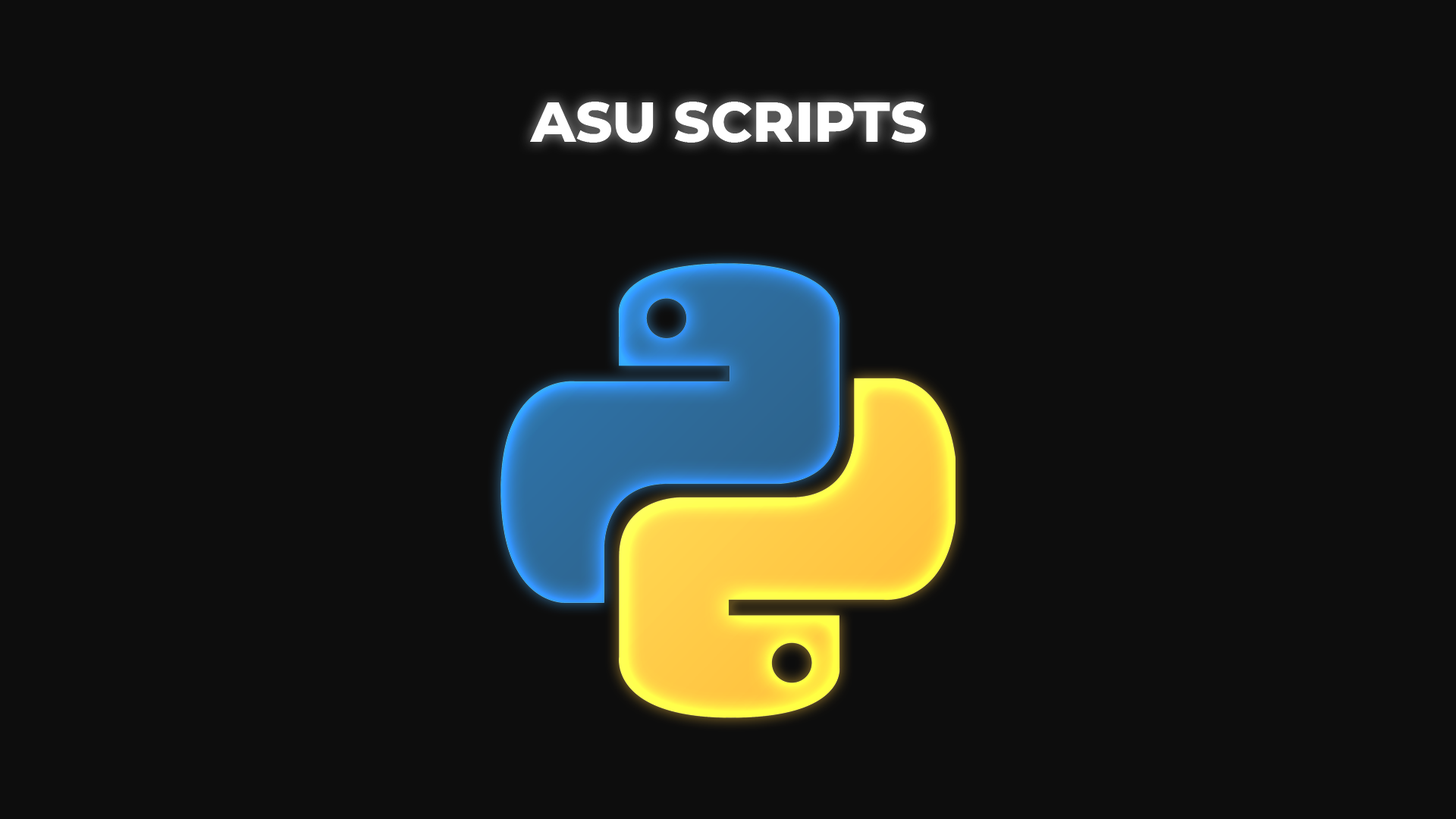
<style>
.page{position:relative;width:1456px;height:819px;background:#0d0d0d}
.page>*{position:absolute;margin:0}
.t1{font:56.9px "Montserrat-ExtraBold";color:#ffffff;text-transform:uppercase}
</style>
<div class="page">
<p class="t1" style="left:530px;top:102px;width:396px;height:41px">ASU Scripts</p>
</div>
